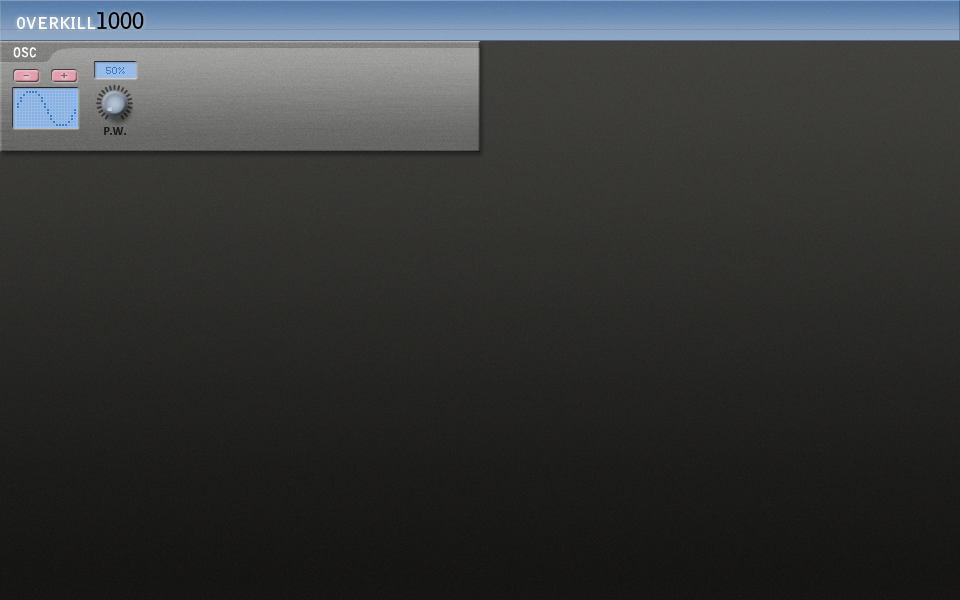
<style>
.page{position:relative;width:960px;height:600px}
.page>*{position:absolute;margin:0}
.t1{font:13px "BellGothicStd-Bold";color:#ffffff}
.t2{font:12px "CourierNewPS-BoldMT";color:#7c6469}
.t3{font:12px "CourierNewPS-BoldMT";color:#7b6267}
.t4{font:8px "SubwayTicker";color:#417bbf}
.t5{font:12px "Calibri-Bold";color:#191919}
</style>
<div class="page">
<p class="t1" style="left:13px;top:47px;width:23px;height:11px">OSC</p>
<p class="t2" style="left:23px;top:75px;width:6px;height:1px">-</p>
<p class="t3" style="left:60px;top:73px;width:8px;height:5px">+</p>
<p class="t4" style="left:106px;top:67px;width:19px;height:7px">50%</p>
<p class="t5" style="left:104px;top:127px;width:22px;height:8px">P.W.</p>
</div>
